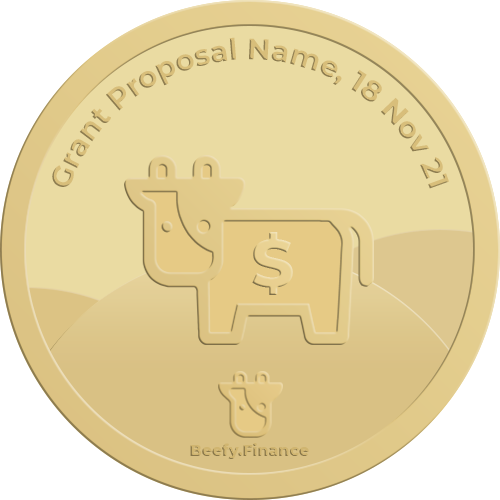
<style>
.page{position:relative;width:500px;height:500px;background:#eadba2}
.page>*{position:absolute;margin:0}
.t1{font:29.2px "Montserrat-Bold";color:#d8be7a}
</style>
<div class="page">
<p class="t1" style="left:52px;top:37px;width:397px;height:152px;text-align:center">Grant Proposal Name, 18 Nov 21</p>
</div>
